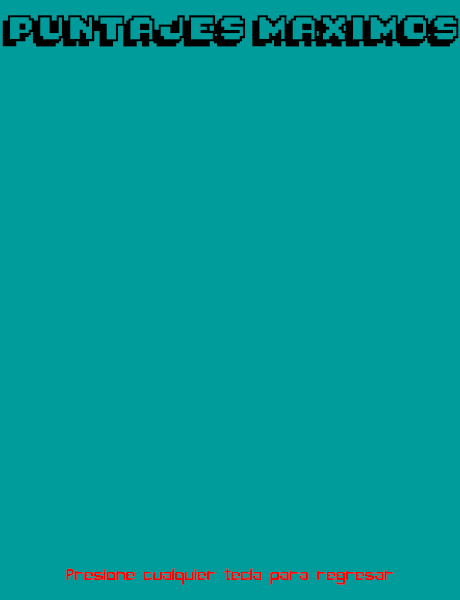
<style>
.page{position:relative;width:460px;height:600px;background:#009b9b}
.page>*{position:absolute;margin:0}
.t1{font:20px "Pixelmania";color:#000000}
.t2{font:16px "PixelBug";color:#ff0000}
</style>
<div class="page">
<p class="t1" style="left:2px;top:15px;width:457px;height:32px">PUNTAJES MAXIMOS</p>
<p class="t2" style="left:66px;top:568px;width:328px;height:17px">Presione cualquier tecla para regresar</p>
</div>
